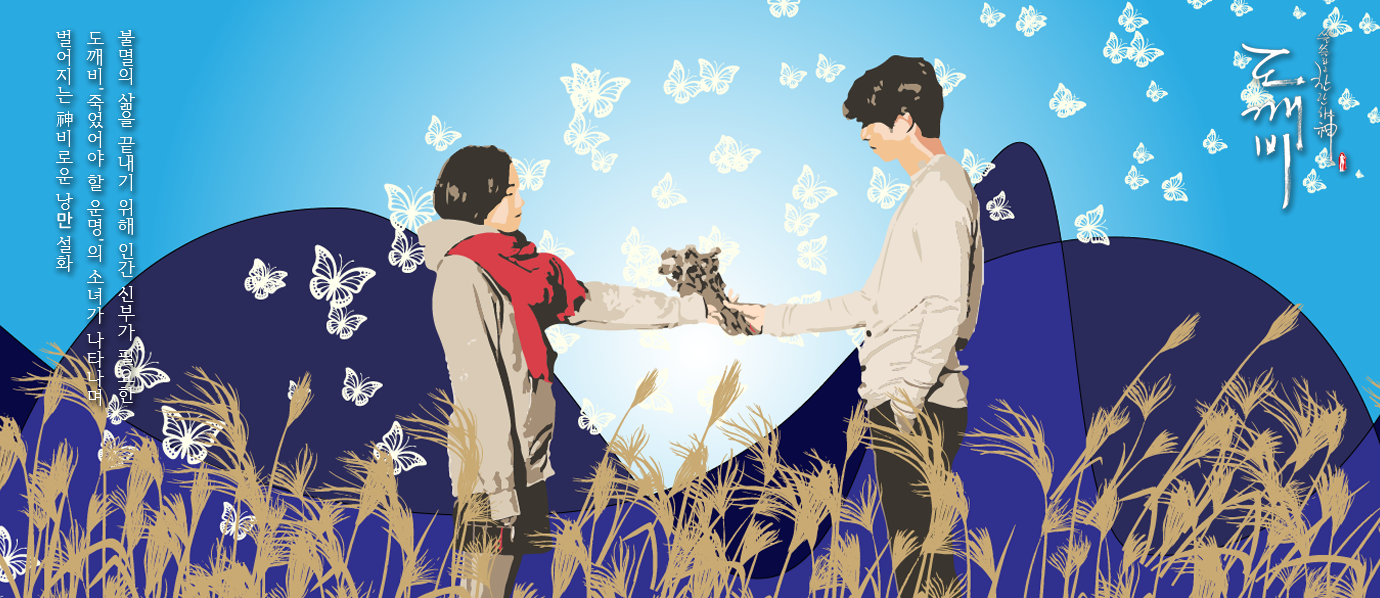
<style>
.page{position:relative;width:1380px;height:598px}
.page>*{position:absolute;margin:0}
.t1{font:18px/31px "HCRBatang";letter-spacing:0.05em;color:#ffffff}
.t2{font:18px/31px "NotoSansKR-Regular";letter-spacing:0.05em;color:#ffffff}
</style>
<div class="page">
<p class="t1" style="left:56px;top:30px;width:79px;height:376px">불멸의 삶을 끝내기 위해 인간 신부가 필요한 도깨비'죽었어야 할 운명'의 소녀가 나타나며 벌어지는 神비로운 낭<span class="t2">만 </span>설화</p>
</div>
